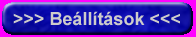
<style>
.page{position:relative;width:196px;height:37px}
.page>*{position:absolute;margin:0}
.t1{font:18px "Arial-BoldMT";color:#cdcbcb}
</style>
<div class="page">
<p class="t1" style="left:13px;top:11px;width:167px;height:15px">&gt;&gt;&gt; Beállítások &lt;&lt;&lt;</p>
<p class="t1" style="left:13px;top:11px;width:167px;height:15px">&gt;&gt;&gt; Beállítások &lt;&lt;&lt;</p>
</div>
